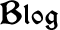
<style>
.page{position:relative;width:60px;height:30px;background:#ffffff}
.page>*{position:absolute;margin:0}
.t1{font:24px "Kelmscott-Regular";letter-spacing:0.05em;color:#000000}
.t2{font:30px "Kelmscott-Regular";letter-spacing:0.05em;color:#000000}
</style>
<div class="page">
<p class="t1" style="left:0px;top:0px;width:58px;height:30px"><span class="t2">B</span>log</p>
</div>
